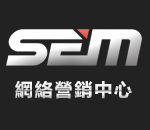
<style>
.page{position:relative;width:150px;height:130px;background:#222222}
.page>*{position:absolute;margin:0}
.t1{font:18px "MicrosoftYaHei-Bold";letter-spacing:0.1em}
</style>
<div class="page">
<p class="t1" style="left:15px;top:81px;width:117px;height:18px">網絡營銷中心</p>
</div>
